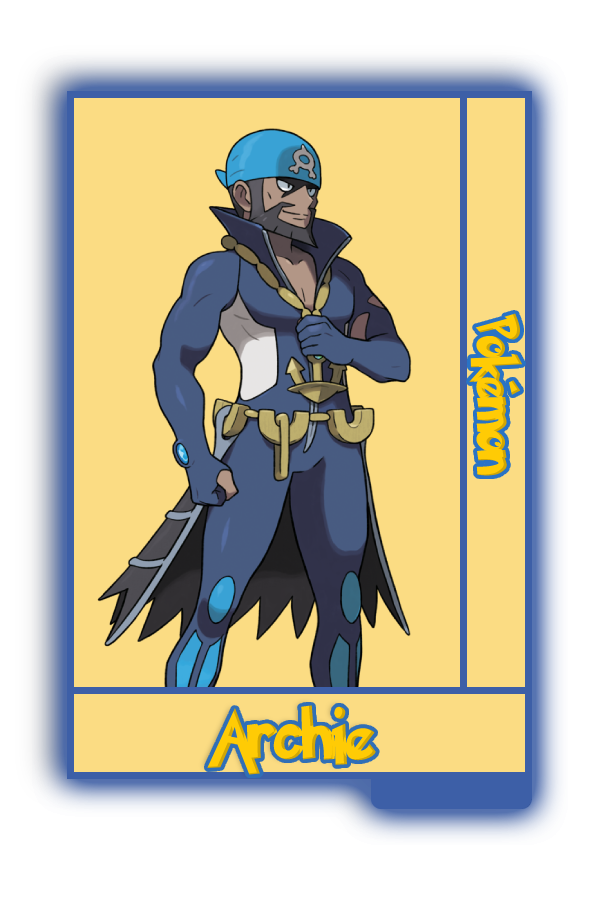
<style>
.page{position:relative;width:600px;height:900px;background:#fbdc83}
.page>*{position:absolute;margin:0}
.t1{font:48.8px "PokemonSolidNormal";color:#ffcb05;scale:0.8 1}
.t2{font:56.6px "PokemonSolidNormal";color:#ffcb05;scale:0.92 1}
</style>
<div class="page">
<p class="t1" style="left:469px;top:313px;width:54px;height:163px;rotate:90deg">Pokémon</p>
<p class="t2" style="left:207px;top:705px;width:169px;height:70px">Archie</p>
</div>
